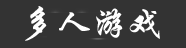
<style>
.page{position:relative;width:186px;height:48px;background:#333333}
.page>*{position:absolute;margin:0}
.t1{font:36px "STXingkai";color:#ffffff}
</style>
<div class="page">
<p class="t1" style="left:25px;top:6px;width:135px;height:35px">多人游戏</p>
</div>
